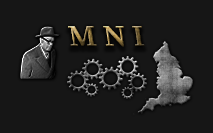
<style>
.page{position:relative;width:213px;height:133px;background:#161616}
.page>*{position:absolute;margin:0}
.t1{font:30px "SourceSerifRoman-Semibold"}
</style>
<div class="page">
<p class="t1" style="left:68px;top:26px;width:77px;height:21px">M N I</p>
</div>
